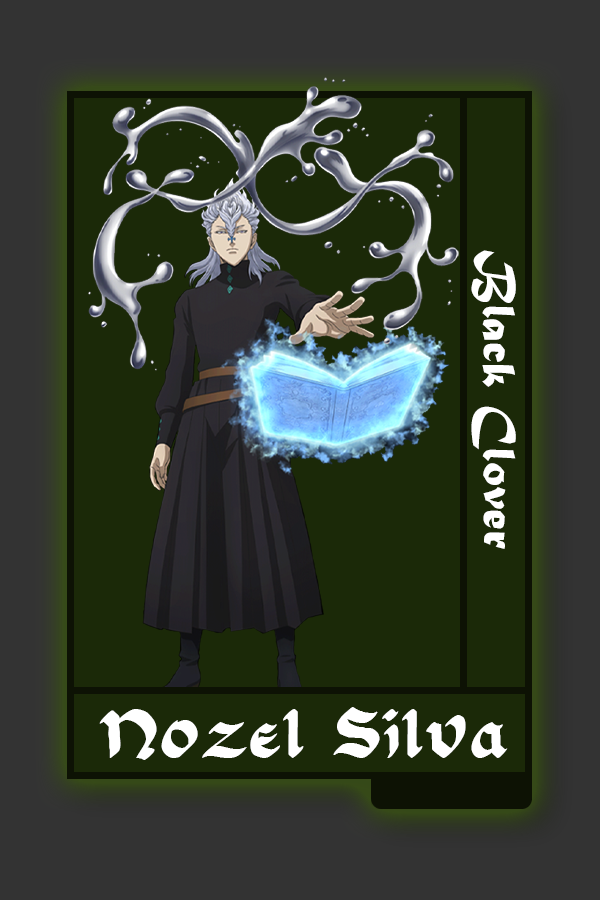
<style>
.page{position:relative;width:600px;height:900px;background:#1b2908}
.page>*{position:absolute;margin:0}
.t1{font:48.8px "MaturaMTScriptCapitals";color:#ffffff}
.t2{font:60.3px "FloranteatLaura";color:#ffffff}
</style>
<div class="page">
<p class="t1" style="left:471px;top:250px;width:45px;height:299px;rotate:90deg">Black Clover</p>
<p class="t2" style="left:99px;top:707px;width:409px;height:53px">Nozel Silva</p>
</div>
